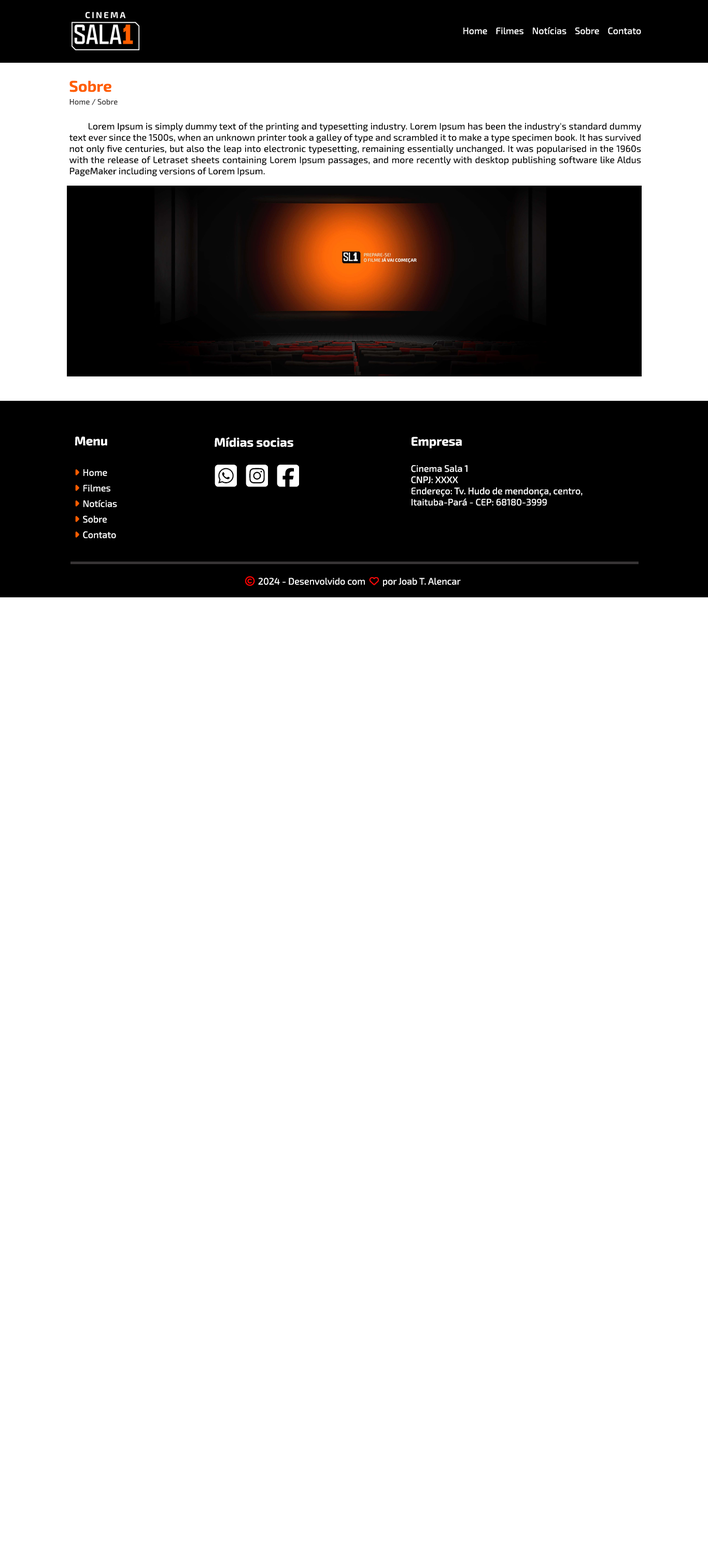
<style>
.page{position:relative;width:708px;height:1568px;background:#ffffff}
.page>*{position:absolute;margin:0}
.t1{font:9.3px "Exo2-Regular";color:#ffffff}
.t2{font:15.6px "Exo2-Bold";color:#ff5e00}
.t3{font:7.8px "Exo2-Regular";color:#333232}
.t4{font:9.3px "Exo2-Regular";color:#000000}
.t5{font:12.4px "Exo2-Bold";color:#ffffff}
.t6{font:9.3px "FontAwesome6Free-Regular";color:#ff0000}
.t7{font:9.3px "FontAwesome6Free-Regular";color:#f40a0a}
</style>
<div class="page">
<p class="t1" style="left:464px;top:27px;width:177px;height:7px">Home    Filmes    Notícias    Sobre    Contato</p>
<p class="t2" style="left:69px;top:80px;width:42px;height:12px">Sobre</p>
<p class="t3" style="left:69px;top:99px;width:49px;height:6px">Home / Sobre</p>
<p class="t4" style="left:69px;top:122px;width:573px;height:54px;text-align:justify">Lorem Ipsum is simply dummy text of the printing and typesetting industry. Lorem Ipsum has been the industry's standard dummy text ever since the 1500s, when an unknown printer took a galley of type and scrambled it to make a type specimen book. It has survived not only five centuries, but also the leap into electronic typesetting, remaining essentially unchanged. It was popularised in the 1960s with the release of Letraset sheets containing Lorem Ipsum passages, and more recently with desktop publishing software like Aldus PageMaker including versions of Lorem Ipsum.</p>
<p class="t5" style="left:215px;top:437px;width:78px;height:10px">Mídias socias</p>
<p class="t1" style="left:411px;top:437px;width:172px;height:69px"><span class="t5">Empresa<br><br></span>Cinema Sala 1<br>CNPJ: XXXX<br>Endereço: Tv. Hudo de mendonça, centro, Itaituba-Pará - CEP: 68180-3999</p>
<p class="t1" style="left:245px;top:576px;width:216px;height:10px"><span class="t6">copyright </span>2024 - Desenvolvido com  <span class="t7">heart </span>por Joab T. Alencar</p>
</div>
